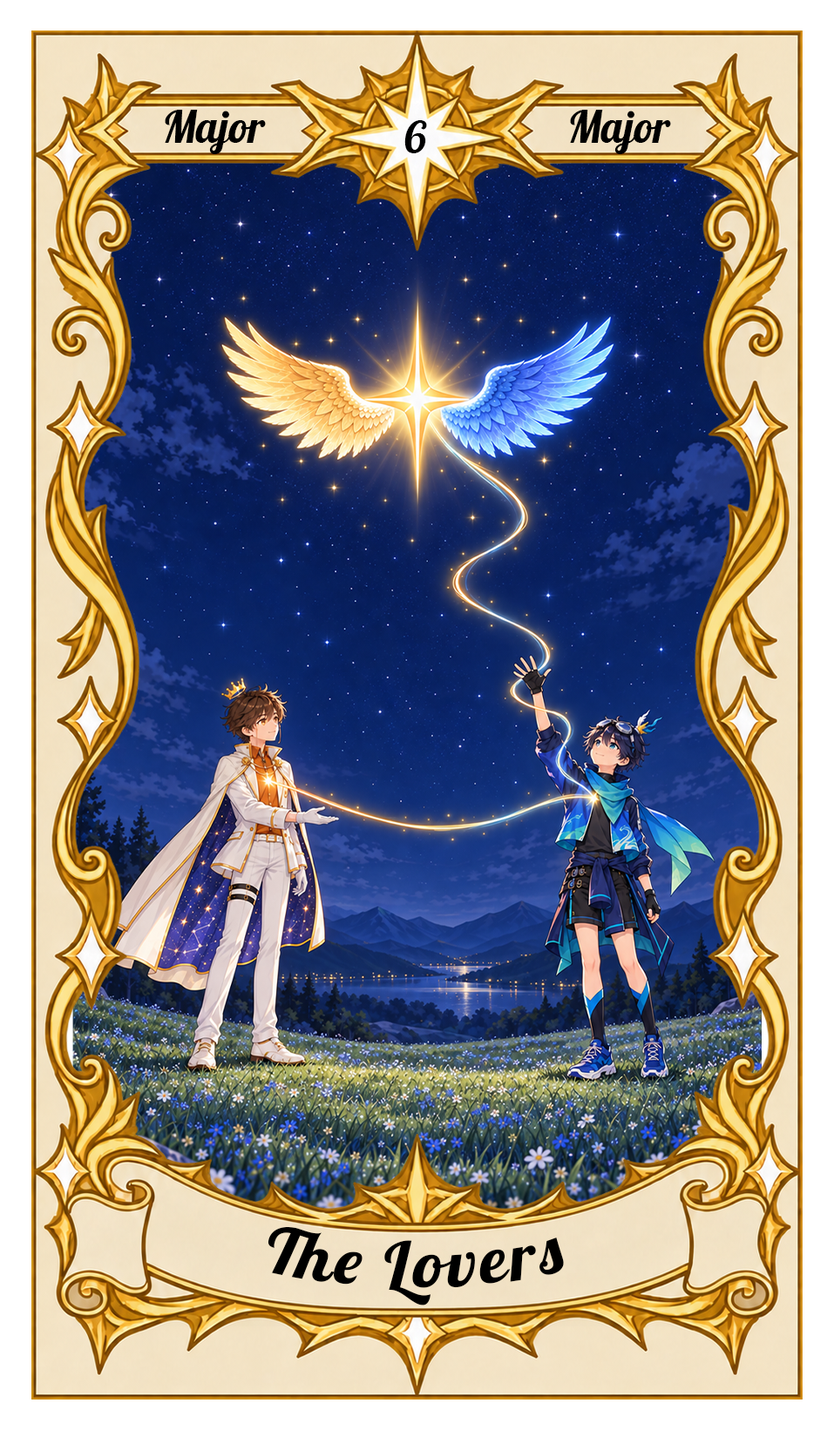
<style>
.page{position:relative;width:834px;height:1430px}
.page>*{position:absolute;margin:0}
.t1{font:43.6px "Lobster-Regular";color:#000000}
.t2{font:65.3px "Lobster-Regular";letter-spacing:0.05em;color:#000000}
</style>
<div class="page">
<p class="t1" style="left:165px;top:110px;width:101px;height:44px">Major</p>
<p class="t1" style="left:570px;top:110px;width:101px;height:44px">Major</p>
<p class="t1" style="left:404px;top:120px;width:23px;height:33px">6</p>
<p class="t2" style="left:267px;top:1227px;width:297px;height:79px">The Lovers</p>
</div>
